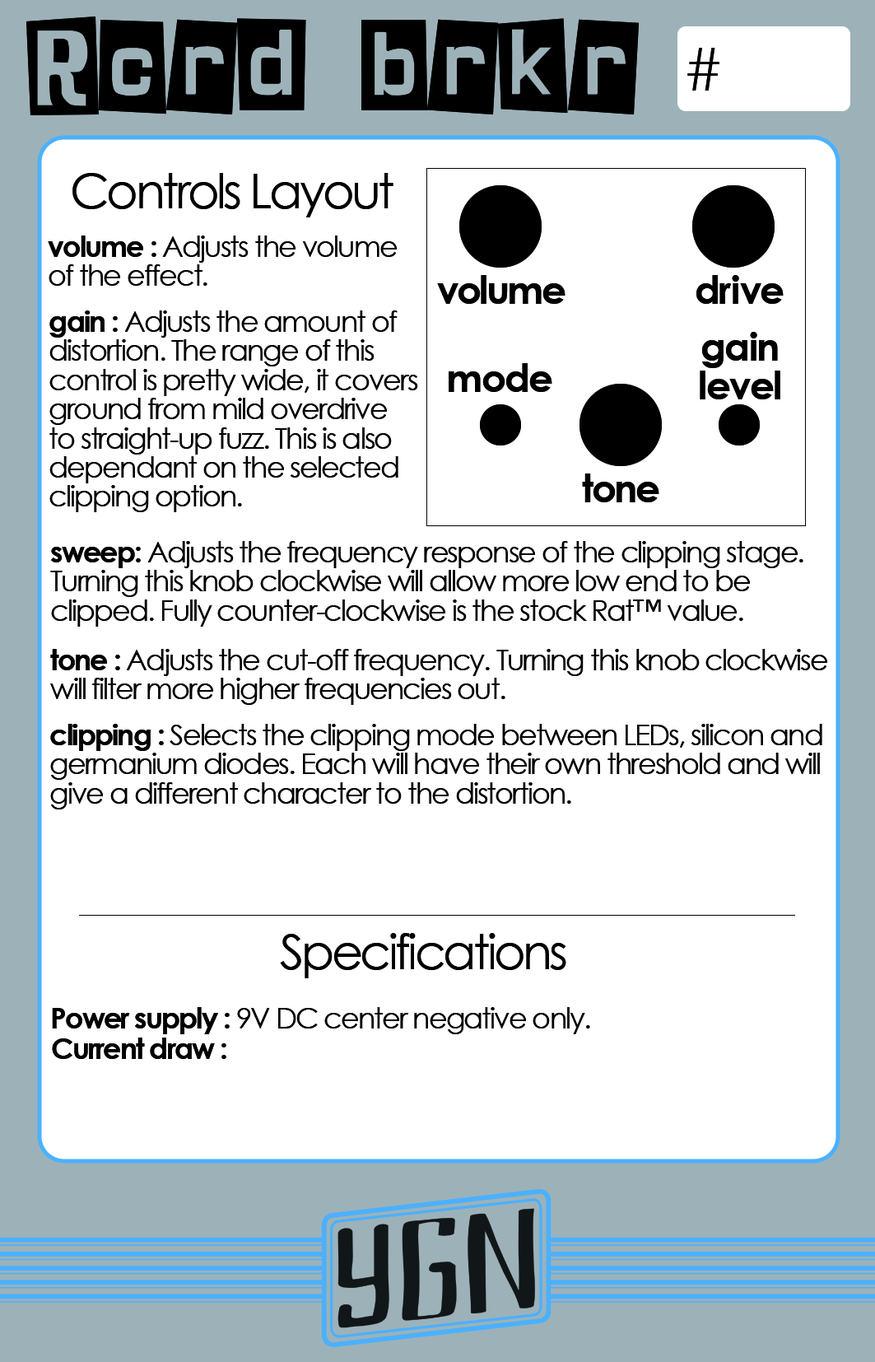
<style>
.page{position:relative;width:875px;height:1362px;background:#ffffff}
.page>*{position:absolute;margin:0}
.t1{font:111.9px "SHINJI-BLUES";color:#000000}
.t2{font:58.4px "CenturyGothic";color:#000000}
.t3{font:48.6px "CenturyGothic";letter-spacing:-0.06em;color:#000000}
.t4{font:29.2px/29.2px "CenturyGothic";letter-spacing:-0.06em;color:#000000}
.t5{font:29.2px/29.2px "CenturyGothic-Bold";letter-spacing:-0.06em;color:#000000}
.t6{font:38.9px "CenturyGothic-Bold";letter-spacing:-0.06em;color:#000000}
.t7{font:38.9px "CenturyGothic-Bold";color:#000000}
.t8{font:29.2px/9.7px "CenturyGothic-Bold";letter-spacing:-0.06em;color:#000000}
.t9{font:29.2px/9.7px "CenturyGothic";letter-spacing:-0.06em;color:#000000}
.t10{font:38.9px/38.9px "CenturyGothic-Bold";letter-spacing:-0.04em;color:#000000}
.t11{font:38.9px/38.9px "CenturyGothic-Bold";letter-spacing:-0.22em;color:#000000}
.t12{font:38.9px "CenturyGothic-Bold";letter-spacing:-0.04em;color:#000000}
.t13{font:29.2px "CenturyGothic";letter-spacing:-0.06em;color:#000000}
.t14{font:29.2px "CenturyGothic-Bold";letter-spacing:-0.06em;color:#000000}
</style>
<div class="page">
<p class="t1" style="left:26px;top:16px;width:614px;height:99px">Rcrd brkr</p>
<p class="t2" style="left:688px;top:48px;width:32px;height:43px">#</p>
<p class="t3" style="left:72px;top:173px;width:322px;height:44px">Controls Layout</p>
<p class="t4" style="left:48px;top:236px;width:349px;height:50px"><span class="t5">volume : </span>Adjusts the volume <br>of the effect.</p>
<p class="t6" style="left:437px;top:275px;width:129px;height:29px">volume</p>
<p class="t7" style="left:697px;top:275px;width:87px;height:29px"><span class="t6">d</span>ri<span class="t6">ve</span></p>
<p class="t4" style="left:49px;top:310px;width:369px;height:202px"><span class="t8">gain : </span><span class="t9">Adjusts the amount of<br></span>distortion. The range of this<br>control is pretty wide, it covers<br>ground from mild overdrive<br>to straight-up fuzz. This is also<br>dependant on the selected<br>clipping option.</p>
<p class="t10" style="left:700px;top:332px;width:81px;height:67px"><span class="t11"> </span>gain<br>level</p>
<p class="t12" style="left:449px;top:363px;width:104px;height:29px">mode</p>
<p class="t6" style="left:582px;top:474px;width:78px;height:28px">tone</p>
<p class="t4" style="left:50px;top:541px;width:754px;height:86px"><span class="t5">sweep: </span>Adjusts the frequency response of the clipping stage. <br>Turning this knob clockwise will allow more low end to be <br>clipped. Fully counter-clockwise is the stock Rat™ value.</p>
<p class="t4" style="left:50px;top:649px;width:778px;height:56px"><span class="t5">tone : </span>Adjusts the cut-off frequency. Turning this knob clockwise<br>will filter more higher frequencies out.</p>
<p class="t4" style="left:50px;top:724px;width:773px;height:86px"><span class="t5">clipping :</span> Selects the clipping mode between LEDs, silicon and<br>germanium diodes. Each will have their own threshold and will<br>give a different character to the distortion.</p>
<p class="t3" style="left:280px;top:933px;width:287px;height:45px">Specifications</p>
<p class="t13" style="left:52px;top:1007px;width:538px;height:27px"><span class="t14">Power supply : </span>9V DC center negative only.</p>
<p class="t14" style="left:52px;top:1038px;width:174px;height:21px">Current draw :</p>
</div>
